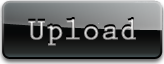
<style>
.page{position:relative;width:164px;height:64px}
.page>*{position:absolute;margin:0}
.t1{font:30.5px "PrestigeEliteStd-Bd";font-weight:bold}
</style>
<div class="page">
<p class="t1" style="left:28px;top:19px;width:108px;height:27px">Upload</p>
</div>
